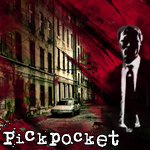
<style>
.page{position:relative;width:150px;height:150px}
.page>*{position:absolute;margin:0}
.t1{font:18px "junko-typewriter";color:#ffffff}
.t2{font:25px "junko-typewriter";color:#ffffff}
.t3{font:38px "junko-typewriter";color:#ffffff}
.t4{font:34px "junko-typewriter";color:#ffffff}
</style>
<div class="page">
<p class="t1" style="left:0px;top:123px;width:119px;height:25px"><span class="t2">P</span>i<span class="t3">c</span>kpo<span class="t4">c</span>ket</p>
</div>
